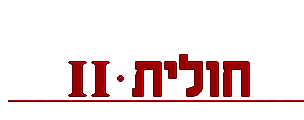
<style>
.page{position:relative;width:304px;height:120px;background:#ffffff}
.page>*{position:absolute;margin:0}
.t1{font:74.5px "Aharoni-Bold";color:#960000;scale:0.84 1}
</style>
<div class="page">
<p class="t1" style="left:133px;top:54px;width:117px;height:42px">חולית</p>
</div>
